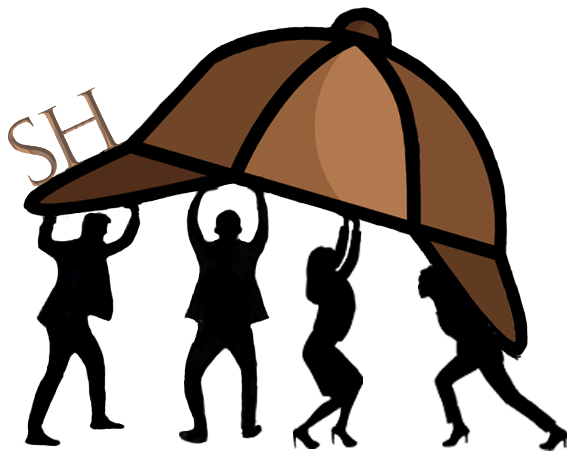
<style>
.page{position:relative;width:576px;height:459px;background:#ffffff}
.page>*{position:absolute;margin:0}
.t1{font:82.6px "TrajanColor-Concept"}
.t2{font:84.5px "TrajanColor-Concept"}
</style>
<div class="page">
<p class="t1" style="left:37px;top:87px;width:87px;height:84px;rotate:-25deg">H</p>
<p class="t2" style="left:8px;top:116px;width:49px;height:71px;rotate:-31deg">S</p>
</div>
